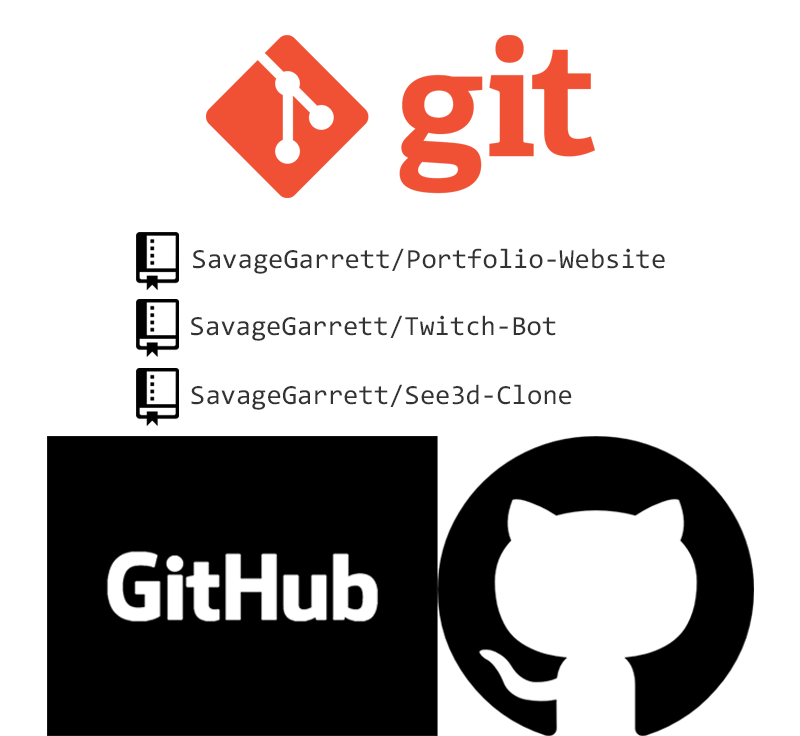
<style>
.page{position:relative;width:800px;height:736px;background:#ffffff}
.page>*{position:absolute;margin:0}
.t1{font:27.6px "Consolas";color:#323432}
</style>
<div class="page">
<p class="t1" style="left:193px;top:248px;width:472px;height:26px">SavageGarrett/Portfolio-Website</p>
<p class="t1" style="left:191px;top:315px;width:365px;height:26px">SavageGarrett/Twitch-Bot</p>
<p class="t1" style="left:191px;top:384px;width:381px;height:26px">SavageGarrett/See3d-Clone</p>
</div>
